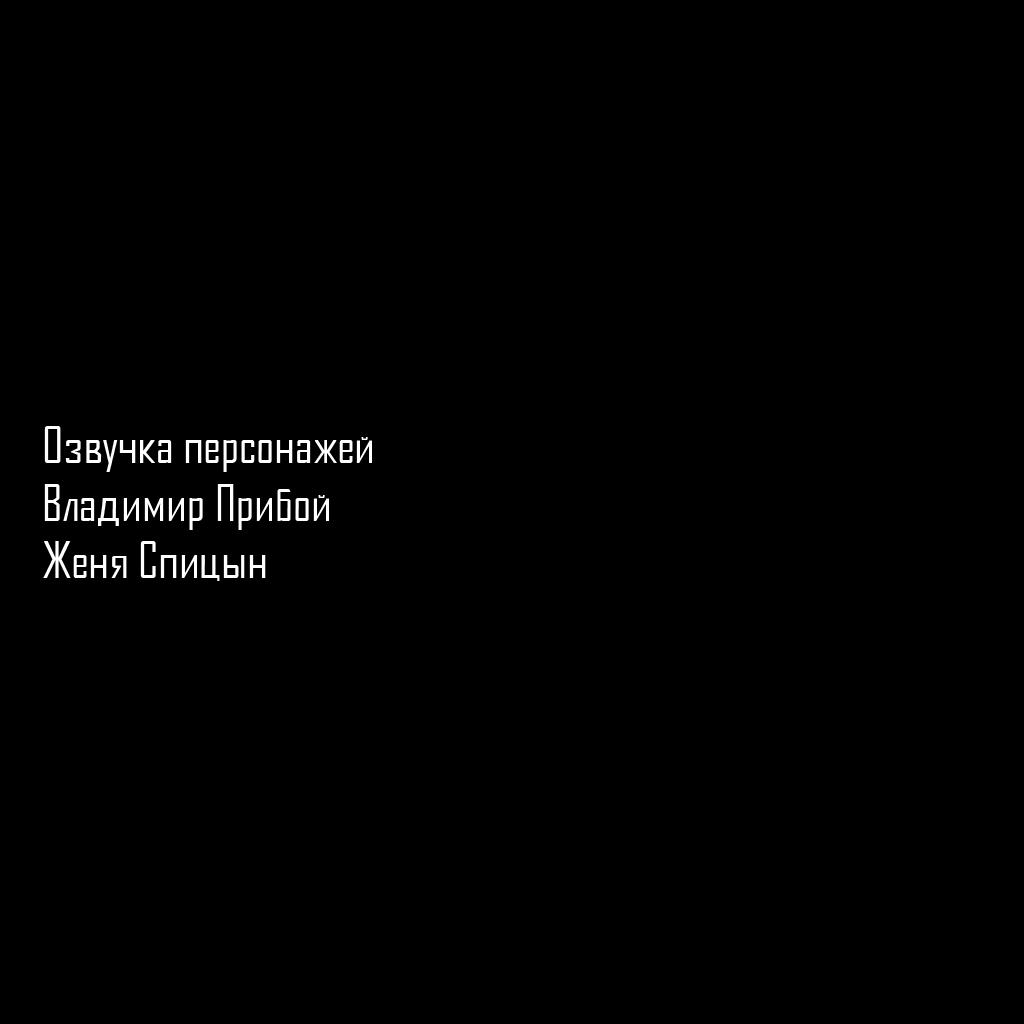
<style>
.page{position:relative;width:1024px;height:1024px;background:#000000}
.page>*{position:absolute;margin:0}
.t1{font:48px "AgencyFBCyrillic";color:#ffffff}
</style>
<div class="page">
<p class="t1" style="left:43px;top:426px;width:329px;height:155px">Озвучка персонажей<br>Владимир Прибой<br>Женя Спицын</p>
</div>
